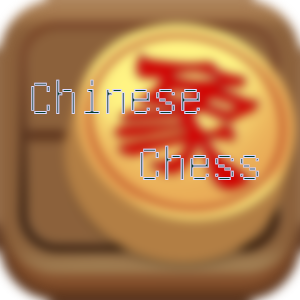
<style>
.page{position:relative;width:300px;height:300px}
.page>*{position:absolute;margin:0}
.t1{font:50px "GNUUnifontFull"}
</style>
<div class="page">
<p class="t1" style="left:31px;top:79px;width:169px;height:35px">Chinese</p>
<p class="t1" style="left:140px;top:145px;width:119px;height:35px">Chess</p>
</div>
